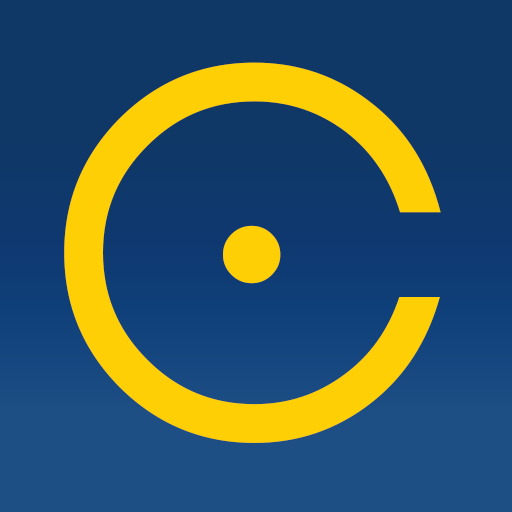
<style>
.page{position:relative;width:512px;height:512px;background:#0f3867}
.page>*{position:absolute;margin:0}
.t1{font:508.3px "Vonique64-Bold";letter-spacing:0.02em;color:#ffcf06}
</style>
<div class="page">
<p class="t1" style="left:64px;top:62px;width:377px;height:381px">C</p>
<p class="t1" style="left:223px;top:225px;width:58px;height:59px">.</p>
</div>
